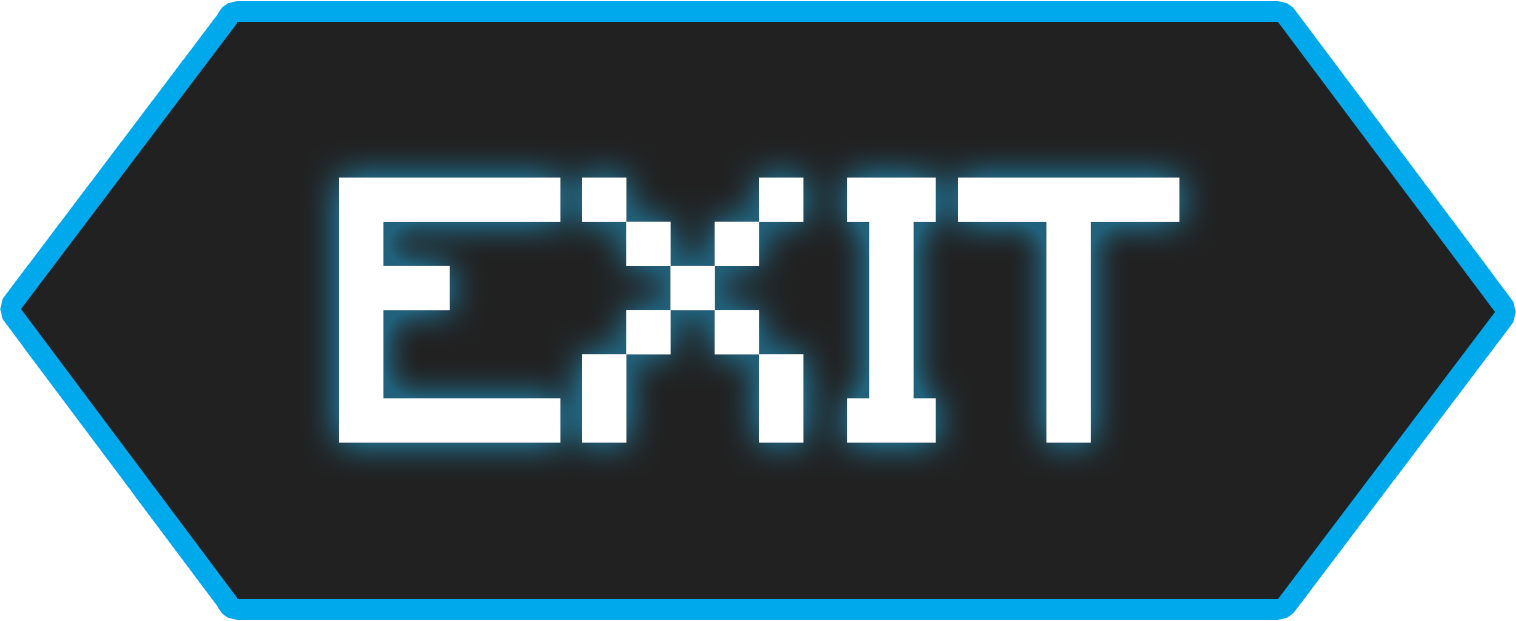
<style>
.page{position:relative;width:1516px;height:621px;background:#212121}
.page>*{position:absolute;margin:0}
.t1{font:353.3px "Minecraft";color:#ffffff}
</style>
<div class="page">
<p class="t1" style="left:339px;top:177px;width:841px;height:266px">EXIT</p>
</div>
